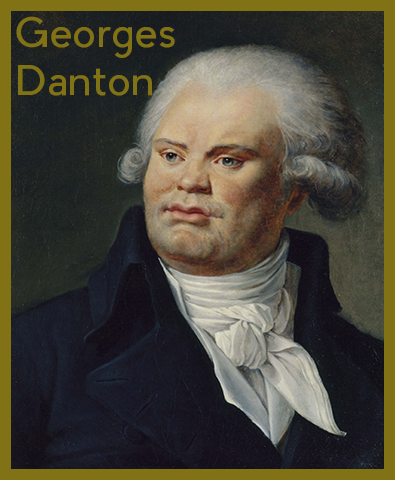
<style>
.page{position:relative;width:395px;height:480px}
.page>*{position:absolute;margin:0}
.t1{font:40px "PierSans";color:#807215}
</style>
<div class="page">
<p class="t1" style="left:16px;top:16px;width:159px;height:80px">Georges<br>Danton</p>
</div>
